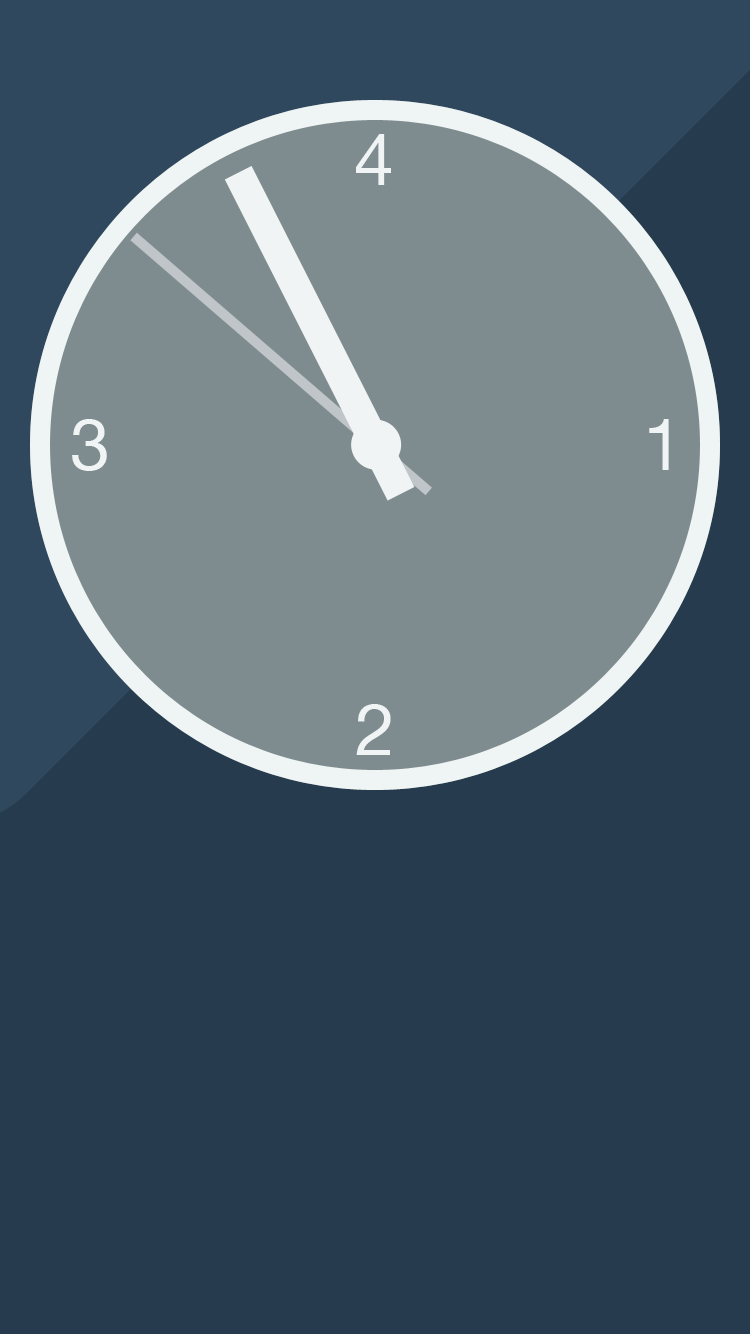
<style>
.page{position:relative;width:750px;height:1334px;background:#263b4d}
.page>*{position:absolute;margin:0}
.t1{font:72px "HelveticaNeue";color:#f0f4f4}
</style>
<div class="page">
<p class="t1" style="left:356px;top:134px;width:35px;height:51px">4</p>
<p class="t1" style="left:72px;top:419px;width:35px;height:52px">3</p>
<p class="t1" style="left:649px;top:419px;width:20px;height:51px">1</p>
<p class="t1" style="left:356px;top:704px;width:35px;height:51px">2</p>
</div>
